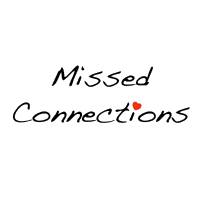
<style>
.page{position:relative;width:200px;height:200px;background:#ffffff}
.page>*{position:absolute;margin:0}
.t1{font:30px "Handwriting-Dakota";color:#000000}
</style>
<div class="page">
<p class="t1" style="left:12px;top:65px;width:178px;height:58px;text-align:center">Missed<br>Connections</p>
</div>
